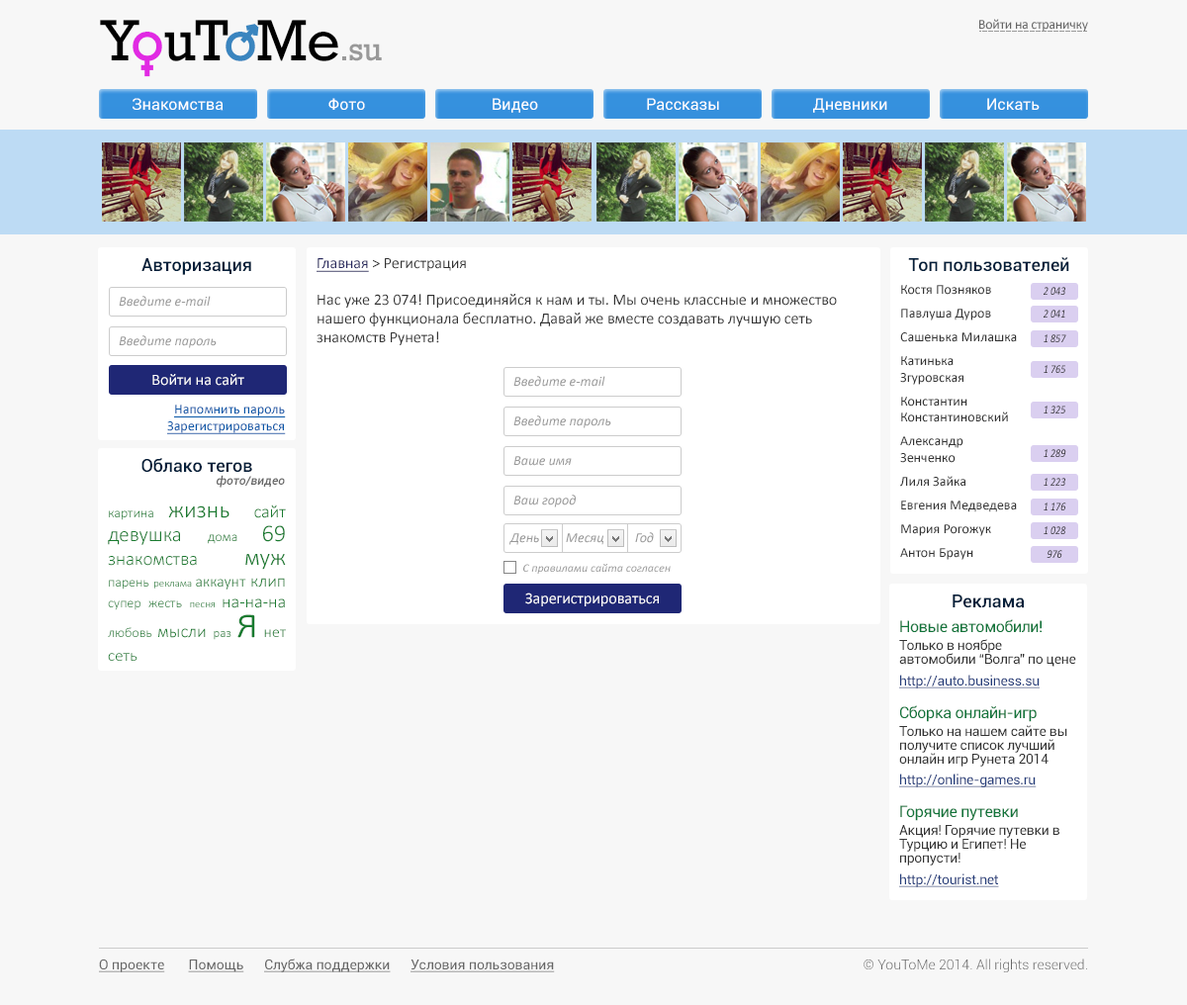
<style>
.page{position:relative;width:1187px;height:1005px;background:#f7f7f7}
.page>*{position:absolute;margin:0}
.t1{font:33.8px "Rockwell";letter-spacing:-0.02em;color:#999999}
.t2{font:59.2px "Rockwell";letter-spacing:-0.02em;color:#000000}
.t3{font:59.2px "Rockwell";letter-spacing:-0.02em;color:#e12ae3}
.t4{font:59.2px "Rockwell";letter-spacing:-0.02em;color:#3a85bf}
.t5{font:13.8px "Calibri";letter-spacing:-0.02em;color:#666666}
.t6{font:15.8px "Roboto-Regular";color:#ffffff}
.t7{font:17.8px "Roboto-Medium";color:#041f3a}
.t8{font:15.8px "Calibri";color:#333333}
.t9{font:15.8px "Calibri";color:#25265d;text-decoration:underline}
.t10{font:13.8px "Calibri";color:#333333}
.t11{font:11.9px "Calibri-Italic";color:#2d2d2d;scale:0.83 1}
.t12{font:13.8px "Calibri-Italic";color:#999999}
.t13{font:11.9px "Calibri-Italic";scale:0.83 1}
.t14{font:15.8px "Calibri";color:#ffffff}
.t15{font:13.8px "Calibri";color:#0756a7;text-decoration:underline}
.t16{font:11.9px "Roboto-MediumItalic";color:#666666}
.t17{font:13.8px "Calibri-Light";color:#197b30}
.t18{font:23.7px "Calibri-Light";color:#197b30}
.t19{font:17.8px "Calibri-Light";color:#197b30}
.t20{font:20.8px/23.7px "Calibri-Light";color:#197b30}
.t21{font:13.8px/23.7px "Calibri-Light";color:#197b30}
.t22{font:23.7px/23.7px "Calibri-Light";color:#197b30}
.t23{font:18.8px/23.7px "Calibri-Light";color:#197b30}
.t24{font:10.9px "Calibri-Light";color:#197b30}
.t25{font:15.8px "Calibri-Light";color:#197b30}
.t26{font:12.9px/29.7px "Calibri-Light";color:#197b30}
.t27{font:47.5px/29.7px "Calibri-Light";color:#197b30}
.t28{font:15.8px/29.7px "Calibri-Light";color:#197b30}
.t29{font:16.8px/23.7px "Calibri-Light";color:#197b30}
.t30{font:11.9px "Calibri-Italic";color:#999999}
.t31{font:15.8px "Roboto-Regular";letter-spacing:-0.02em;color:#11753b}
.t32{font:13.8px/13.8px "Roboto-Regular";letter-spacing:-0.02em;color:#333333}
.t33{font:13.8px "Roboto-Regular";letter-spacing:-0.02em;color:#233c7a;text-decoration:underline}
.t34{font:13.8px "Roboto-Regular";color:#666666;text-decoration:underline}
.t35{font:13.8px "Roboto-Light";color:#666666}
</style>
<div class="page">
<p class="t1" style="left:100px;top:20px;width:282px;height:41px"><span class="t2">Y</span><span class="t3">o</span><span class="t2">uT</span><span class="t4">o</span><span class="t2">Me</span>.su</p>
<p class="t5" style="left:979px;top:19px;width:109px;height:13px">Войти на страничку</p>
<p class="t6" style="left:133px;top:98px;width:91px;height:13px">Знакомства</p>
<p class="t6" style="left:328px;top:98px;width:37px;height:12px">Фото</p>
<p class="t6" style="left:493px;top:98px;width:45px;height:15px">Видео</p>
<p class="t6" style="left:647px;top:98px;width:72px;height:13px">Рассказы</p>
<p class="t6" style="left:813px;top:98px;width:74px;height:15px">Дневники</p>
<p class="t6" style="left:987px;top:98px;width:52px;height:13px">Искать</p>
<p class="t7" style="left:908px;top:257px;width:161px;height:15px">Топ пользователей</p>
<p class="t7" style="left:141px;top:258px;width:110px;height:17px">Авторизация</p>
<p class="t8" style="left:316px;top:258px;width:150px;height:14px"><span class="t9">Главная </span>&gt; Регистрация</p>
<p class="t8" style="left:316px;top:294px;width:521px;height:51px">Нас уже 23 074! Присоединяйся к нам и ты. Мы очень классные и множество нашего функционала бесплатно. Давай же вместе создавать лучшую сеть знакомств Рунета!</p>
<p class="t10" style="left:900px;top:285px;width:117px;height:275px">Костя Позняков<br><br>Павлуша Дуров<br><br>Сашенька Милашка<br><br>Катинька Згуровская<br><br>Константин Константиновский<br><br>Александр Зенченко<br><br>Лиля Зайка<br><br>Евгения Медведева<br><br>Мария Рогожук<br><br>Антон Браун</p>
<p class="t11" style="left:1043px;top:287px;width:22px;height:8px">2 043</p>
<p class="t12" style="left:119px;top:296px;width:92px;height:11px">Введите e-mail</p>
<p class="t11" style="left:1043px;top:310px;width:22px;height:7px">2 041</p>
<p class="t12" style="left:119px;top:335px;width:98px;height:13px">Введите пароль</p>
<p class="t13" style="left:1043px;top:334px;width:23px;height:8px">1 857</p>
<p class="t13" style="left:1043px;top:365px;width:22px;height:8px">1 765</p>
<p class="t14" style="left:152px;top:374px;width:92px;height:12px">Войти на сайт</p>
<p class="t12" style="left:513px;top:376px;width:92px;height:11px">Введите e-mail</p>
<p class="t15" style="left:167px;top:404px;width:119px;height:30px;text-align:right">Напомнить пароль<br>Зарегистрироваться</p>
<p class="t13" style="left:1043px;top:405px;width:22px;height:8px">1 325</p>
<p class="t12" style="left:513px;top:415px;width:98px;height:13px">Введите пароль</p>
<p class="t13" style="left:1043px;top:449px;width:23px;height:8px">1 289</p>
<p class="t7" style="left:141px;top:458px;width:111px;height:15px">Облако тегов</p>
<p class="t12" style="left:513px;top:456px;width:59px;height:10px">Ваше имя</p>
<p class="t16" style="left:217px;top:475px;width:68px;height:13px">фото/видео</p>
<p class="t13" style="left:1043px;top:478px;width:22px;height:8px">1 223</p>
<p class="t12" style="left:513px;top:494px;width:63px;height:13px">Ваш город</p>
<p class="t17" style="left:108px;top:504px;width:178px;height:157px;text-align:justify">картина <span class="t18">жизнь </span><span class="t19">сайт </span><span class="t20">девушка </span><span class="t21">дома </span><span class="t22">69 </span><span class="t23">знакомства </span><span class="t22">муж </span>парень <span class="t24">реклама </span><span class="t25">аккаунт </span><span class="t19">клип </span>супер жесть <span class="t24">песня </span><span class="t19">на-на-на </span>любовь <span class="t19">мысли </span><span class="t26">раз </span><span class="t27">я </span><span class="t28">нет </span><span class="t29">сеть</span></p>
<p class="t11" style="left:1043px;top:502px;width:23px;height:8px">1 176</p>
<p class="t12" style="left:509px;top:533px;width:30px;height:12px">День</p>
<p class="t12" style="left:566px;top:533px;width:37px;height:12px">Месяц</p>
<p class="t12" style="left:635px;top:532px;width:19px;height:11px">Год</p>
<p class="t13" style="left:1043px;top:526px;width:23px;height:8px">1 028</p>
<p class="t13" style="left:1046px;top:550px;width:16px;height:8px">976</p>
<p class="t30" style="left:523px;top:564px;width:148px;height:10px">С правилами сайта согласен</p>
<p class="t14" style="left:525px;top:592px;width:134px;height:14px">Зарегистрироваться</p>
<p class="t7" style="left:952px;top:594px;width:73px;height:14px">Реклама</p>
<p class="t31" style="left:900px;top:619px;width:141px;height:14px">Новые автомобили!</p>
<p class="t32" style="left:899px;top:639px;width:177px;height:28px">Только в ноябре автомобили “Волга” по цене “Жигулей”</p>
<p class="t33" style="left:899px;top:674px;width:140px;height:14px">http://auto.business.su</p>
<p class="t31" style="left:900px;top:705px;width:136px;height:17px">Сборка онлайн-игр</p>
<p class="t32" style="left:899px;top:725px;width:168px;height:41px">Только на нашем сайте вы получите список лучший онлайн игр Рунета 2014 года</p>
<p class="t33" style="left:899px;top:773px;width:137px;height:14px">http://online-games.ru</p>
<p class="t31" style="left:900px;top:805px;width:118px;height:16px">Горячие путевки</p>
<p class="t32" style="left:899px;top:825px;width:160px;height:40px">Акция! Горячие путевки в Турцию и Египет! Не пропусти!</p>
<p class="t33" style="left:899px;top:873px;width:100px;height:14px">http://tourist.net</p>
<p class="t34" style="left:99px;top:958px;width:456px;height:14px">О проекте       Помощь      Слубжа поддержки      Условия пользования</p>
<p class="t35" style="left:863px;top:958px;width:224px;height:14px">© YouToMe 2014. All rights reserved.</p>
</div>
